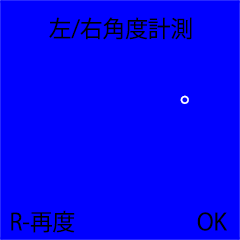
<style>
.page{position:relative;width:240px;height:240px;background:#0000ff}
.page>*{position:absolute;margin:0}
.t1{font:23.1px "KozGoPr6N-Regular";color:#000000}
.t2{font:30px "KozGoPr6N-Regular";color:#ffffff}
</style>
<div class="page">
<p class="t1" style="left:49px;top:17px;width:143px;height:23px">左/右角度計測</p>
<p class="t2" style="left:180px;top:95px;width:9px;height:9px">°</p>
<p class="t1" style="left:11px;top:210px;width:64px;height:23px">R-再度</p>
<p class="t1" style="left:197px;top:212px;width:30px;height:19px">OK</p>
</div>
